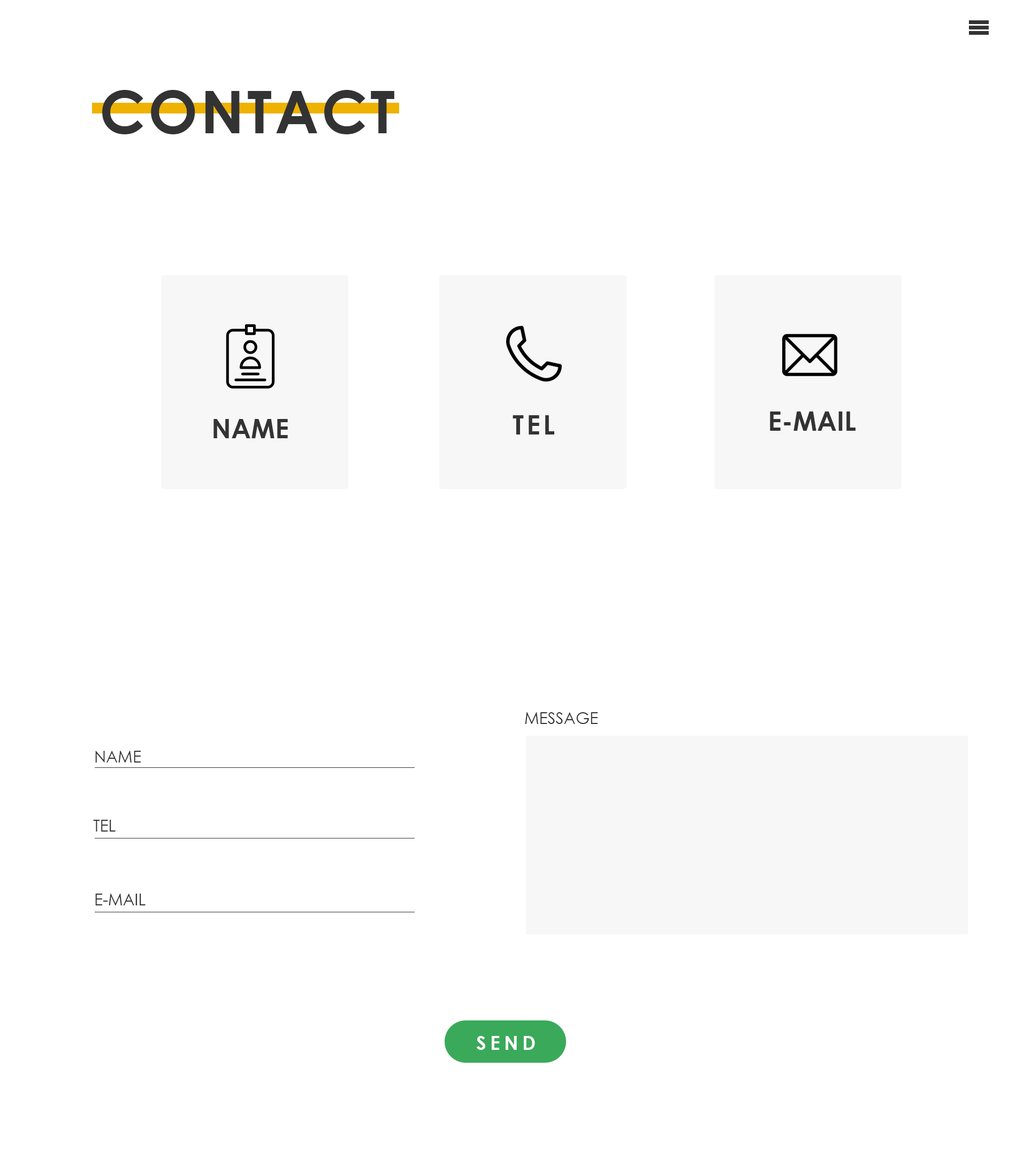
<style>
.page{position:relative;width:1016px;height:1174px;background:#ffffff}
.page>*{position:absolute;margin:0}
.t1{font:58.8px "CenturyGothic-Bold";letter-spacing:0.05em;color:#333333;text-transform:uppercase}
.t2{font:26.7px "CenturyGothic-Bold";color:#333333}
.t3{font:26.7px "CenturyGothic-Bold";letter-spacing:0.1em;color:#333333}
.t4{font:16px "CenturyGothic";color:#333333}
.t5{font:19.3px "CenturyGothic-Bold";letter-spacing:0.2em;color:#ffffff}
</style>
<div class="page">
<p class="t1" style="left:102px;top:90px;width:292px;height:44px">CONTACT</p>
<p class="t2" style="left:770px;top:411px;width:85px;height:20px">E-MAIL</p>
<p class="t2" style="left:213px;top:419px;width:75px;height:19px">NAME</p>
<p class="t3" style="left:513px;top:415px;width:41px;height:19px">TEL</p>
<p class="t4" style="left:525px;top:712px;width:73px;height:12px">MESSAGE</p>
<p class="t4" style="left:95px;top:751px;width:46px;height:11px">NAME</p>
<p class="t4" style="left:93px;top:820px;width:23px;height:11px">TEL</p>
<p class="t4" style="left:95px;top:893px;width:51px;height:12px">E-MAIL</p>
<p class="t5" style="left:476px;top:1036px;width:59px;height:14px">SEND</p>
</div>
